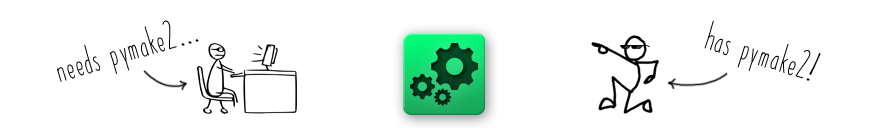
<style>
.page{position:relative;width:888px;height:128px;background:#ffffff}
.page>*{position:absolute;margin:0}
.t1{font:41.4px "PaperDaisy";color:#000000}
.t2{font:41.6px "PaperDaisy";color:#000000}
</style>
<div class="page">
<p class="t1" style="left:57px;top:20px;width:120px;height:62px;rotate:-17deg">needs pymake2</p>
<p class="t2" style="left:704px;top:20px;width:107px;height:59px;rotate:17deg">has pymake2</p>
</div>
